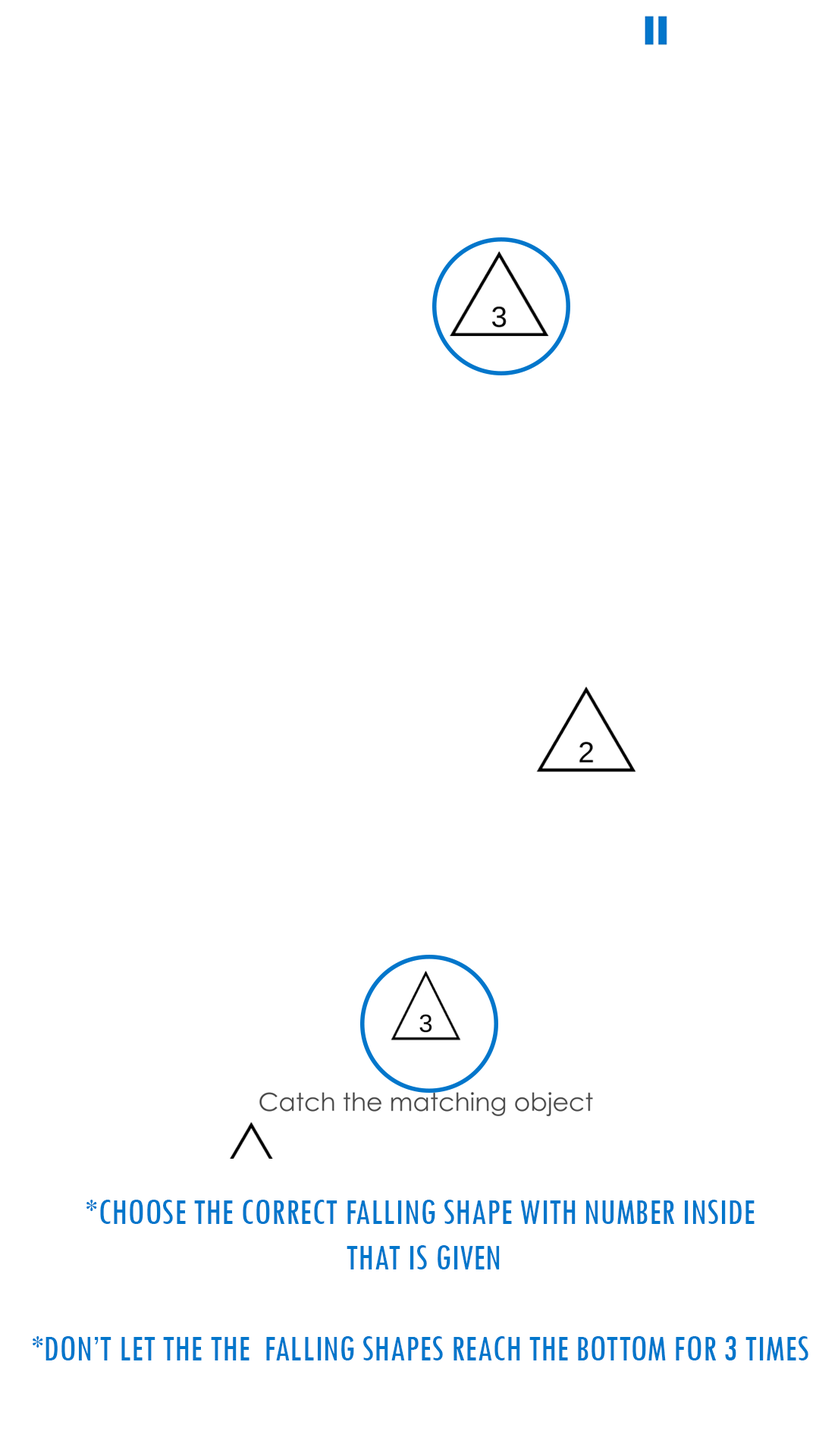
<style>
.page{position:relative;width:819px;height:1456px;background:#ffffff}
.page>*{position:absolute;margin:0}
.t1{font:37.9px "TwCenMT-Condensed";color:#0276cb}
</style>
<div class="page">
<p class="t1" style="left:33px;top:1200px;width:775px;height:160px;text-align:center">*CHOOSE THE CORRECT FALLING SHAPE WITH NUMBER INSIDE <br>THAT IS GIVEN<br><br>*DON’T LET THE THE  FALLING SHAPES REACH THE BOTTOM FOR 3 TIMES</p>
</div>
